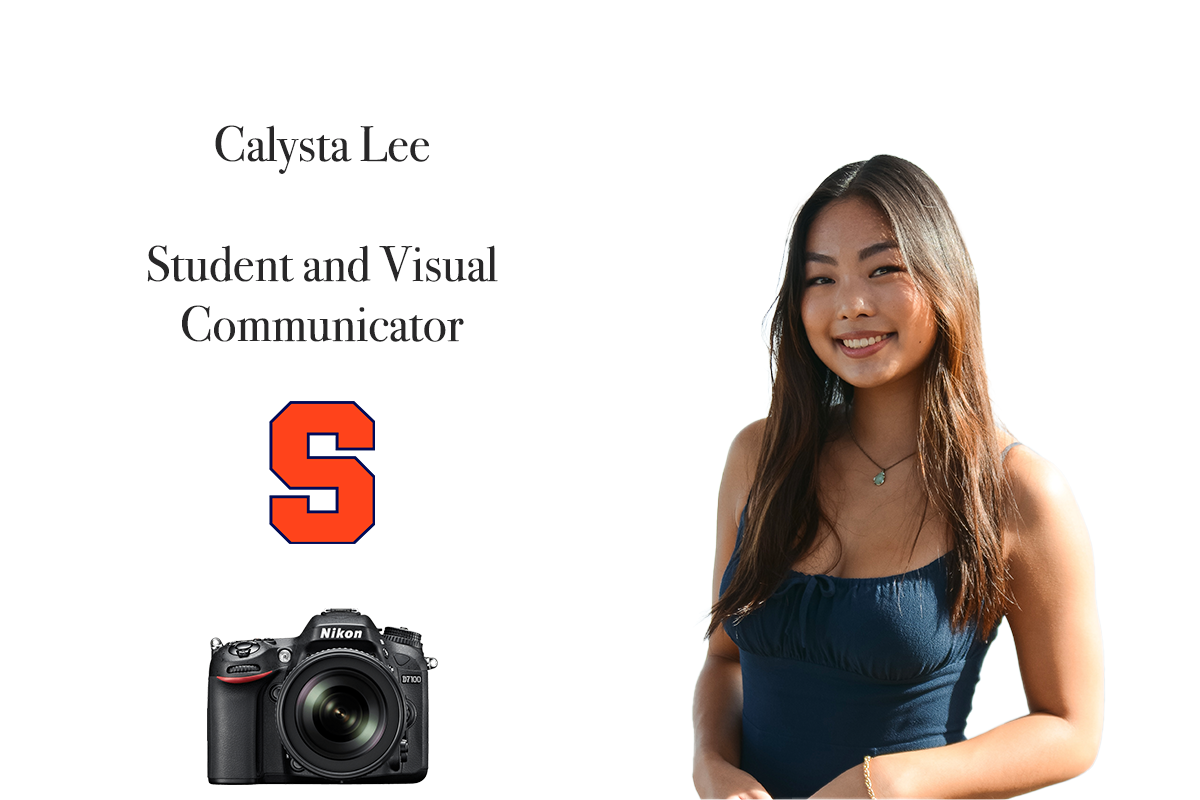
<style>
.page{position:relative;width:1200px;height:800px;background:#ffffff}
.page>*{position:absolute;margin:0}
.t1{font:50px "BodoniSvtyTwoOSITCTT-Book";color:#282728}
</style>
<div class="page">
<p class="t1" style="left:147px;top:125px;width:351px;height:217px;text-align:center">Calysta Lee <br><br>Student and Visual <br>Communicator</p>
</div>
